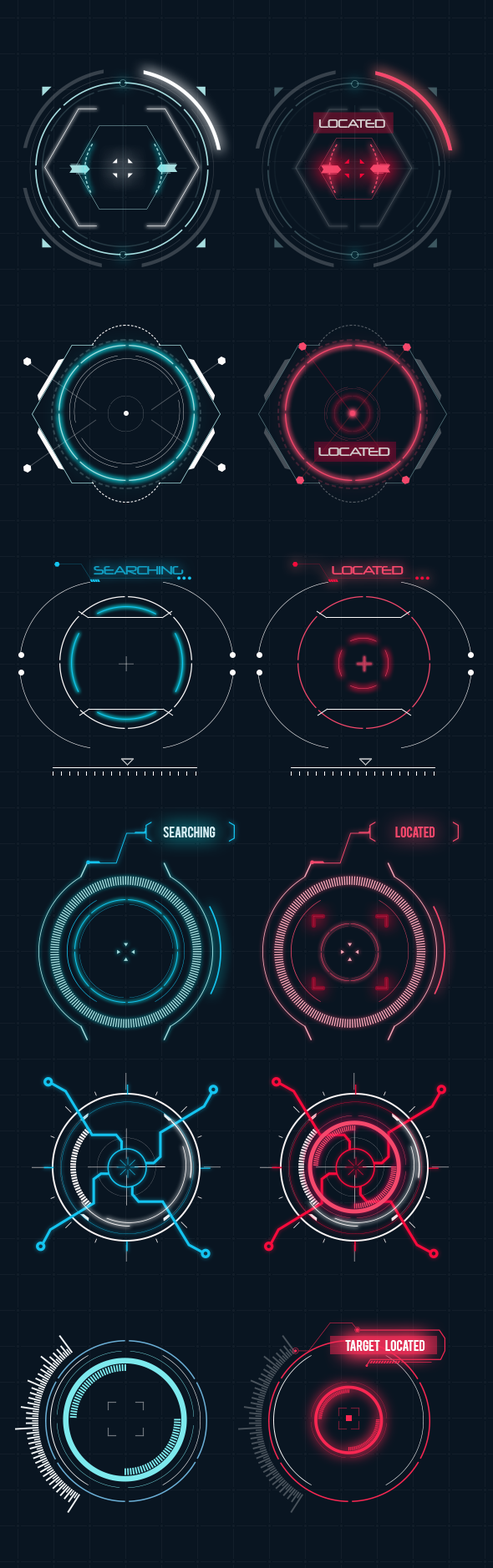
<style>
.page{position:relative;width:493px;height:1568px;background:#091521}
.page>*{position:absolute;margin:0}
.t1{font:10.6px "Neuropol-Regular";color:#dbd3d5}
.t2{font:11.3px "Neuropol-Regular";color:#d2cacd}
.t3{font:11.3px "Neuropol-Regular";color:#119ec2}
.t4{font:11.3px "Neuropol-Regular";color:#f5486c}
.t5{font:11.3px "Bebas";color:#d2edf4}
.t6{font:11.3px "Bebas";color:#f5486c}
.t7{font:11.3px "Bebas";color:#fdfdfd}
</style>
<div class="page">
<p class="t1" style="left:318px;top:119px;width:67px;height:9px">LOCATED</p>
<p class="t2" style="left:318px;top:448px;width:72px;height:8px">LOCATED</p>
<p class="t3" style="left:94px;top:566px;width:90px;height:8px">SEARCHING</p>
<p class="t4" style="left:331px;top:566px;width:72px;height:8px">LOCATED</p>
<p class="t5" style="left:163px;top:827px;width:52px;height:10px">searching</p>
<p class="t6" style="left:395px;top:827px;width:40px;height:10px">LOCATED</p>
<p class="t7" style="left:345px;top:1340px;width:80px;height:11px">TARGET     LOCATED</p>
</div>
